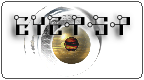
<style>
.page{position:relative;width:144px;height:80px;background:#ffffff}
.page>*{position:absolute;margin:0}
.t1{font:24px "CircuitBoredNF";letter-spacing:0.075em;color:#000000}
</style>
<div class="page">
<p class="t1" style="left:14px;top:15px;width:116px;height:20px">eyePSP</p>
</div>
